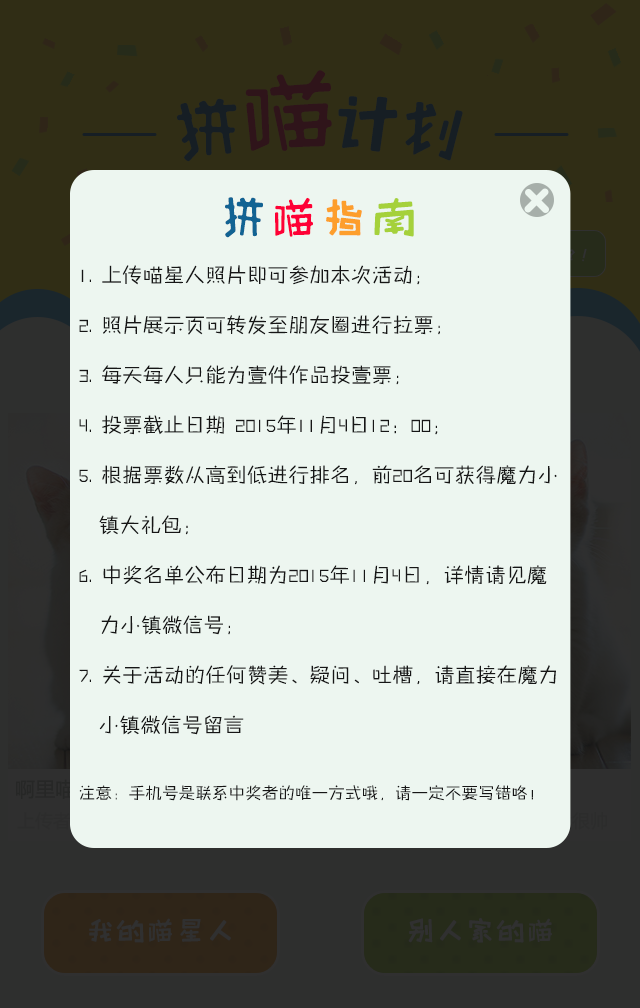
<style>
.page{position:relative;width:640px;height:1008px;background:#edf6f0}
.page>*{position:absolute;margin:0}
.t1{font:50px "HappyZcool";color:#126393}
.t2{font:50px "HappyZcool";color:#fe0036}
.t3{font:50px "HappyZcool";color:#fd9e2c}
.t4{font:50px "HappyZcool";color:#a5d13b}
.t5{font:20px/50px "FZZHYJW--GB1-0";letter-spacing:0.04em;color:#161616}
.t6{font:20px/70px "FZZHYJW--GB1-0";letter-spacing:0.04em;color:#161616}
.t7{font:16px/50px "FZZHYJW--GB1-0";letter-spacing:0.04em;color:#161616}
</style>
<div class="page">
<p class="t1" style="left:225px;top:197px;width:189px;height:41px">拼<span class="t2">喵</span><span class="t3">指</span><span class="t4">南</span></p>
<p class="t5" style="left:79px;top:265px;width:478px;height:536px">1. 上传喵星人照片即可参加本次活动；<br>2. 照片展示页可转发至朋友圈进行拉票；<br>3. 每天每人只能为壹件作品投壹票；<br>4. 投票截止日期 2015年11月4日12：00；<br>5. 根据票数从高到低进行排名，前20名可获得魔力小    　镇大礼包；<br>6. 中奖名单公布日期为2015年11月4日，详情请见魔　力小镇微信号；<br>7. 关于活动的任何赞美、疑问、吐槽，请直接在魔力　<span class="t6">小镇微信号留言<br></span><span class="t7">注意：手机号是联系中奖者的唯一方式哦，请一定不要写错咯！</span></p>
</div>
